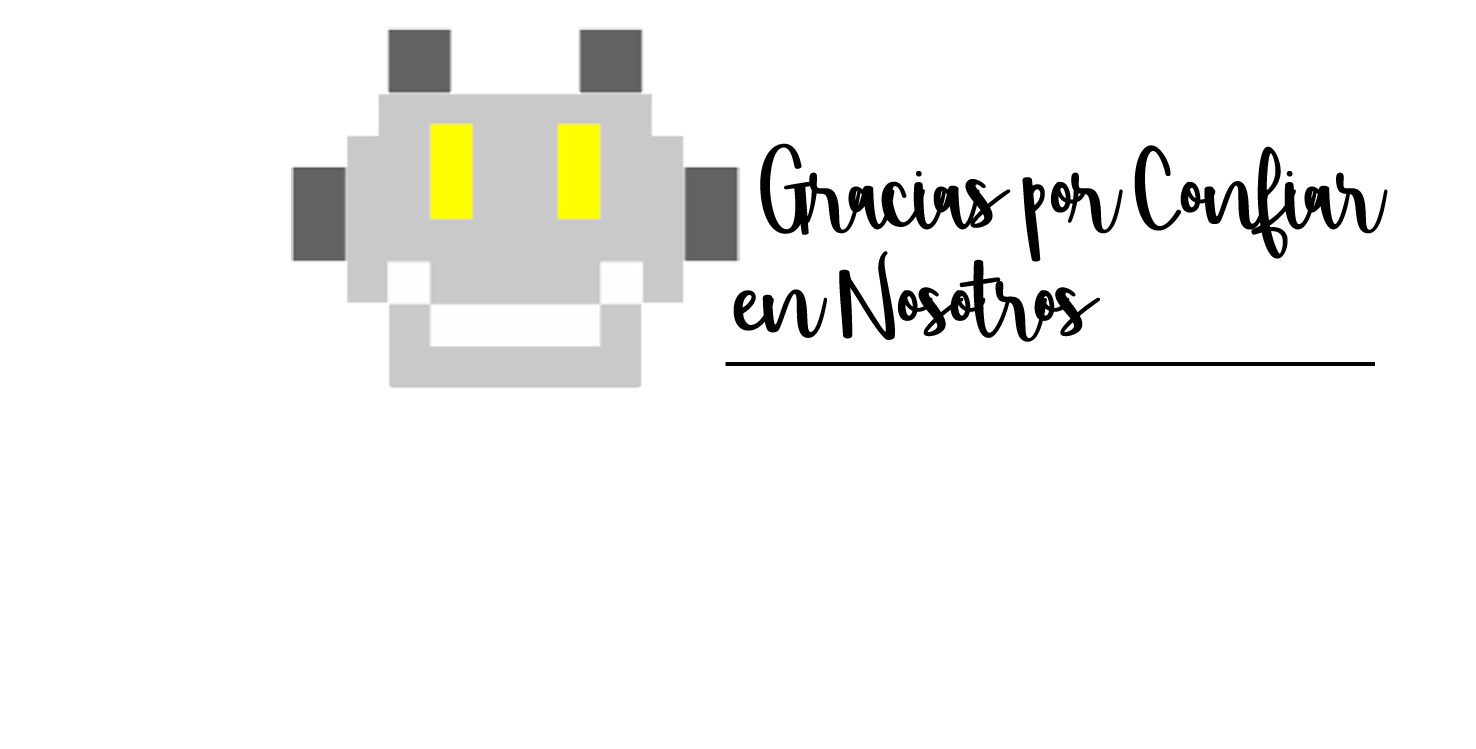
<style>
.page{position:relative;width:1476px;height:749px;background:#ffffff}
.page>*{position:absolute;margin:0}
.t1{font:187.5px/108.3px "Shorthalt";letter-spacing:-0.04em;color:#000000}
</style>
<div class="page">
<p class="t1" style="left:733px;top:143px;width:655px;height:199px">Gracias por Confiar <br>en Nosotros</p>
</div>
